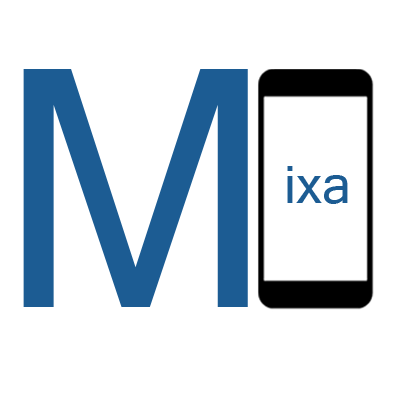
<style>
.page{position:relative;width:400px;height:400px;background:#ffffff}
.page>*{position:absolute;margin:0}
.t1{font:333px "MicrosoftSansSerif";color:#1c5c93}
.t2{font:51.7px "MicrosoftSansSerif";color:#1c5c93}
</style>
<div class="page">
<p class="t1" style="left:23px;top:69px;width:225px;height:238px">M</p>
<p class="t2" style="left:287px;top:166px;width:61px;height:38px">ixa</p>
</div>
